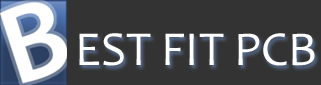
<style>
.page{position:relative;width:321px;height:85px;background:#333333}
.page>*{position:absolute;margin:0}
.t1{font:49px "Candara";color:#ffffff}
</style>
<div class="page">
<p class="t1" style="left:79px;top:33px;width:236px;height:33px">EST FIT PCB</p>
</div>
